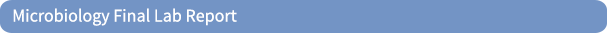
<style>
.page{position:relative;width:607px;height:33px;background:#7394c5}
.page>*{position:absolute;margin:0}
.t1{font:18px "SourceSansPro-Regular";color:#ffffff}
</style>
<div class="page">
<p class="t1" style="left:13px;top:8px;width:224px;height:18px">Microbiology Final Lab Report</p>
</div>
